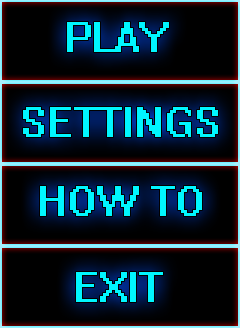
<style>
.page{position:relative;width:240px;height:328px;background:#000000}
.page>*{position:absolute;margin:0}
.t1{font:36px "System";color:#00f6ff}
</style>
<div class="page">
<p class="t1" style="left:67px;top:22px;width:102px;height:30px">PLAY</p>
<p class="t1" style="left:23px;top:107px;width:195px;height:30px">SETTINGS</p>
<p class="t1" style="left:40px;top:186px;width:162px;height:30px">HOW TO</p>
<p class="t1" style="left:76px;top:272px;width:87px;height:30px">EXIT</p>
</div>
